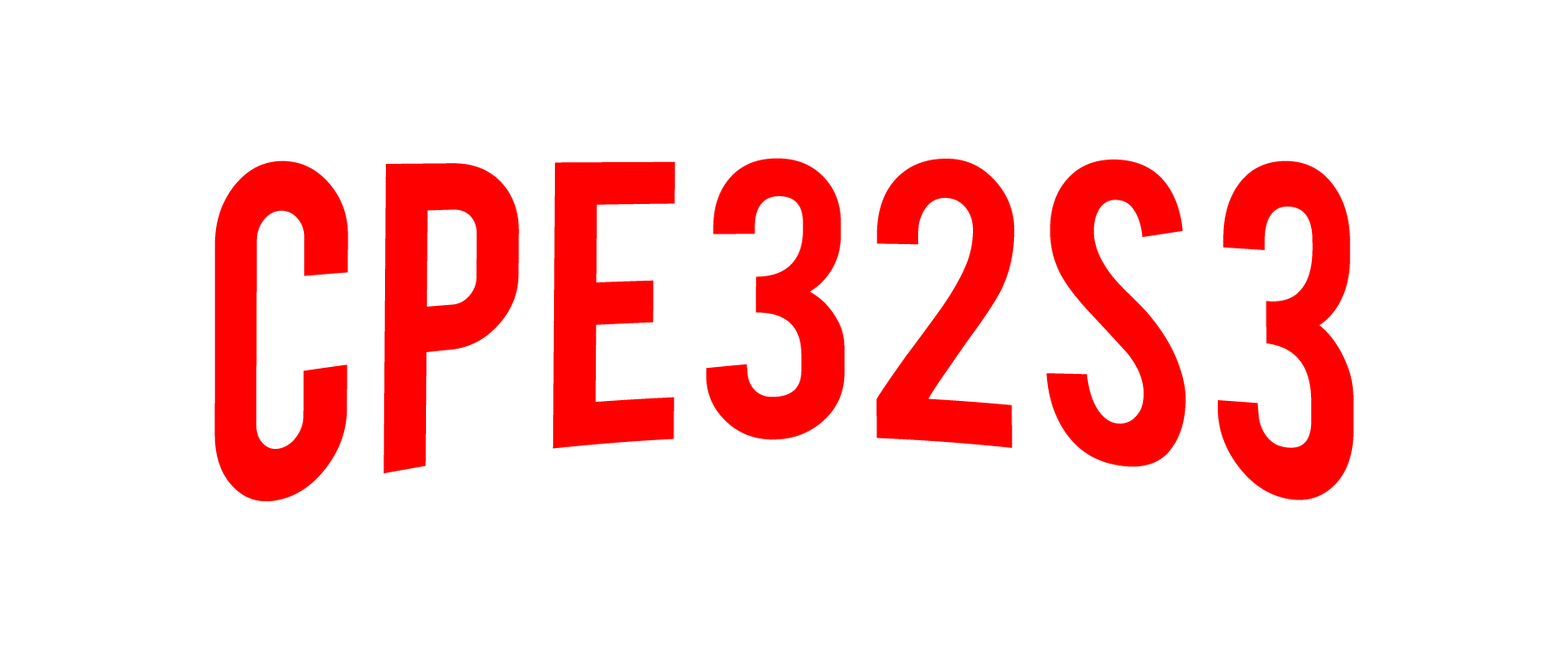
<style>
.page{position:relative;width:1568px;height:659px;background:#ffffff}
.page>*{position:absolute;margin:0}
.t1{font:392px "Bebas";letter-spacing:0.01em;color:#ff0000;scale:0.8 1}
</style>
<div class="page">
<p class="t1" style="left:214px;top:158px;width:1140px;height:343px">cpe32s3</p>
</div>
